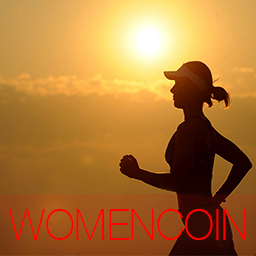
<style>
.page{position:relative;width:256px;height:256px}
.page>*{position:absolute;margin:0}
.t1{font:43.6px "HelveticaNeue-Thin";color:#ff0000;scale:0.92 1}
</style>
<div class="page">
<p class="t1" style="left:8px;top:209px;width:238px;height:31px">WOMENCOIN</p>
</div>
